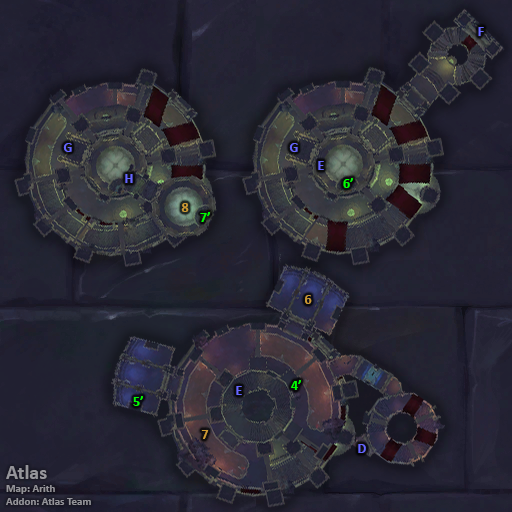
<style>
.page{position:relative;width:512px;height:512px}
.page>*{position:absolute;margin:0}
.t1{font:14px "Calibri-Bold";color:#6666ff}
.t2{font:14px "Calibri-Bold";color:#00ff00}
.t3{font:14px "Calibri-Bold";color:#cc9933}
.t4{font:11px "Calibri-Bold";color:#949499}
.t5{font:20px "Calibri-Bold";color:#949499}
</style>
<div class="page">
<p class="t1" style="left:478px;top:27px;width:6px;height:9px">F</p>
<p class="t1" style="left:63px;top:143px;width:9px;height:9px">G</p>
<p class="t1" style="left:289px;top:143px;width:9px;height:9px">G</p>
<p class="t1" style="left:318px;top:161px;width:6px;height:9px">E</p>
<p class="t1" style="left:125px;top:174px;width:8px;height:9px">H</p>
<p class="t2" style="left:343px;top:178px;width:10px;height:10px">6’</p>
<p class="t3" style="left:181px;top:203px;width:8px;height:9px">8</p>
<p class="t2" style="left:200px;top:212px;width:10px;height:10px">7’</p>
<p class="t3" style="left:305px;top:295px;width:7px;height:9px">6</p>
<p class="t1" style="left:236px;top:386px;width:6px;height:9px">E</p>
<p class="t2" style="left:291px;top:380px;width:10px;height:10px">4’</p>
<p class="t2" style="left:133px;top:396px;width:10px;height:10px">5’</p>
<p class="t3" style="left:201px;top:430px;width:8px;height:9px">7</p>
<p class="t1" style="left:358px;top:444px;width:8px;height:9px">D</p>
<p class="t4" style="left:6px;top:465px;width:85px;height:40px"><span class="t5">Atlas<br></span>Map: Arith<br>Addon: Atlas Team</p>
</div>
